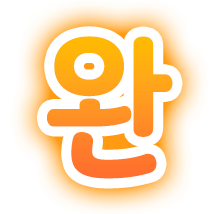
<style>
.page{position:relative;width:214px;height:214px;background:#ffffff}
.page>*{position:absolute;margin:0}
.t1{font:146.7px "Binggrae-Bold";text-transform:uppercase;scale:0.91 1}
</style>
<div class="page">
<p class="t1" style="left:47px;top:36px;width:126px;height:143px">완</p>
</div>
